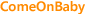
<style>
.page{position:relative;width:86px;height:14px;background:#ffffff}
.page>*{position:absolute;margin:0}
.t1{font:13.2px "MalgunGothicBold";color:#ff8a00}
</style>
<div class="page">
<p class="t1" style="left:0px;top:1px;width:85px;height:14px">ComeOnBaby</p>
</div>
